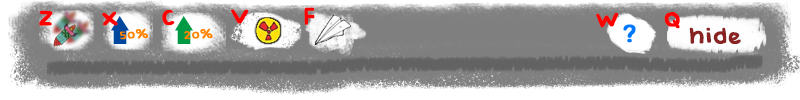
<style>
.page{position:relative;width:800px;height:100px}
.page>*{position:absolute;margin:0}
.t1{font:26px "BabyDoll";color:#ff0000;font-weight:bold}
.t2{font:26px "BabyDoll";color:#8b2222;font-weight:bold}
</style>
<div class="page">
<p class="t1" style="left:39px;top:10px;width:14px;height:16px">Z</p>
<p class="t1" style="left:102px;top:11px;width:16px;height:15px">X</p>
<p class="t1" style="left:162px;top:10px;width:13px;height:16px">C</p>
<p class="t1" style="left:231px;top:9px;width:18px;height:15px">V</p>
<p class="t1" style="left:304px;top:7px;width:11px;height:18px">F</p>
<p class="t1" style="left:596px;top:13px;width:23px;height:15px">W</p>
<p class="t1" style="left:664px;top:12px;width:16px;height:17px">Q</p>
<p class="t2" style="left:689px;top:27px;width:52px;height:17px">hide</p>
</div>
